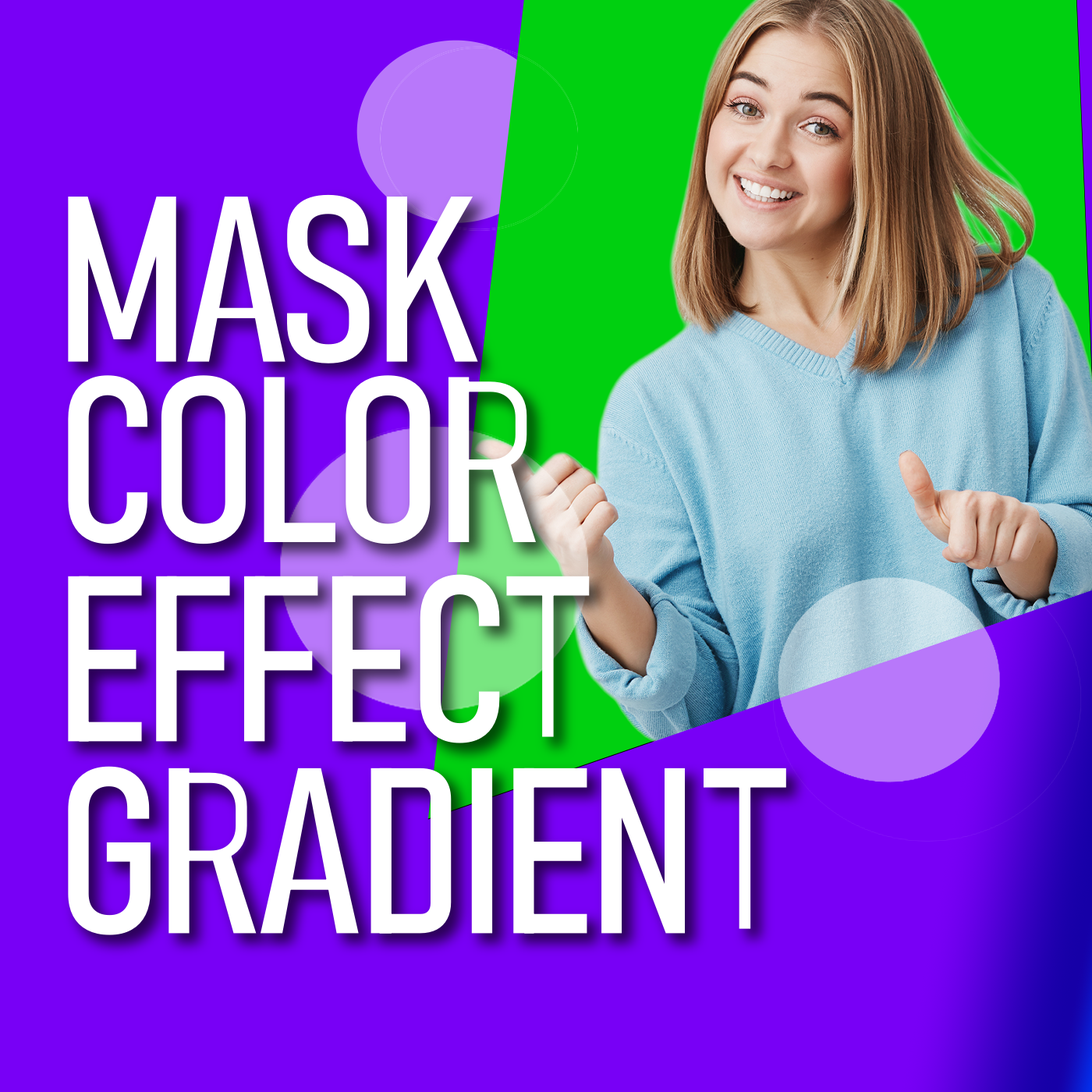
<style>
.page{position:relative;width:1092px;height:1092px;background:#7800f6}
.page>*{position:absolute;margin:0}
.t1{font:230.5px "Bahnschrift";color:#ffffff;font-weight:bold}
</style>
<div class="page">
<p class="t1" style="left:68px;top:194px;width:410px;height:169px">MASK</p>
<p class="t1" style="left:68px;top:375px;width:468px;height:169px">COLOR</p>
<p class="t1" style="left:68px;top:574px;width:522px;height:169px">EFFECT</p>
<p class="t1" style="left:68px;top:766px;width:718px;height:169px">GRADIENT</p>
</div>
